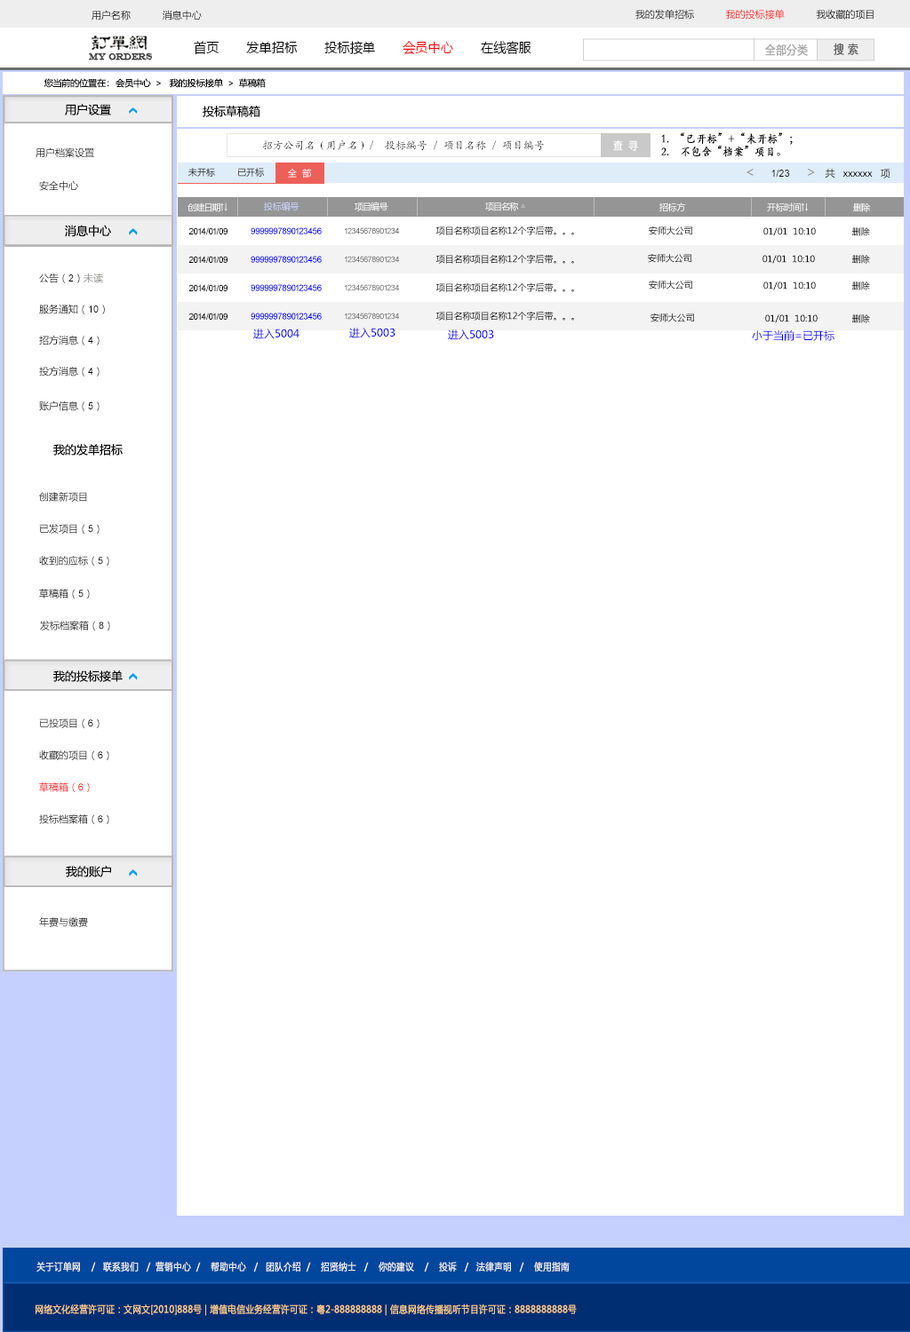
<style>
.page{position:relative;width:910px;height:1332px;background:#ffffff}
.page>*{position:absolute;margin:0}
.t1{font:9.8px "MicrosoftYaHei";color:#000000}
.t2{font:9.8px "MicrosoftYaHei"}
.t3{font:13.7px "MicrosoftYaHei";color:#000000;font-variant:small-caps;scale:0.94 1}
.t4{font:13.7px "MicrosoftYaHei";color:#ff0000;font-variant:small-caps;scale:0.94 1}
.t5{font:8.8px "EngraversMT";color:#434343;font-variant:small-caps;font-weight:bold;scale:0.86 1}
.t6{font:11.7px "MicrosoftYaHei";color:#aaaaaa;font-variant:small-caps;font-weight:bold;scale:0.86 1}
.t7{font:11.7px "MicrosoftYaHei";color:#626262;font-variant:small-caps;font-weight:bold;scale:0.86 1}
.t8{font:8.9px "MicrosoftYaHei";color:#060606}
.t9{font:11.5px "MicrosoftYaHei";color:#060606}
.t10{font:11.7px "STKaiti";color:#000000;font-variant:small-caps;font-weight:bold;scale:0.86 1}
.t11{font:9.8px "MicrosoftYaHei";color:#060606}
.t12{font:10.7px "KaiTi_GB2312";color:#000000}
.t13{font:10.7px "MicrosoftYaHei";color:#ffffff;font-variant:small-caps;font-weight:bold;scale:0.86 1}
.t14{font:8.9px "MicrosoftYaHei"}
.t15{font:9px "MicrosoftYaHei"}
.t16{font:9.8px "ArialMT";color:#060606}
.t17{font:14.2px "MicrosoftYaHei";color:#959595}
.t18{font:8.9px "MicrosoftYaHei";color:#ffffff}
.t19{font:8.9px "MicrosoftYaHei";color:#d1d2ff}
.t20{font:8.9px "ArialMT";color:#020202}
.t21{font:8.9px "ArialMT";color:#0000ff}
.t22{font:8px "ArialMT";color:#535353}
.t23{font:8.9px "MicrosoftYaHei";color:#000000}
.t24{font:8px "ArialMT";color:#626262}
.t25{font:9.8px "MicrosoftYaHei";color:#888584}
.t26{font:10.7px "MicrosoftYaHei";color:#0000ff}
.t27{font:9.8px "ArialMT";color:#000000}
.t28{font:9.8px "ArialMT"}
.t29{font:9.8px "MicrosoftYaHei";color:#ff0000}
.t30{font:9.8px "ArialMT";color:#ff0000}
.t31{font:9.8px "MicrosoftYaHei";color:#eeeeee;font-variant:small-caps;font-weight:bold;scale:0.86 1}
.t32{font:13.7px "STXihei";color:#eeeeee;font-variant:small-caps;font-weight:bold;scale:0.86 1}
.t33{font:9.8px "MicrosoftYaHei";color:#facd89;font-variant:small-caps;font-weight:bold;scale:0.87 1}
.t34{font:9.8px "MicrosoftYaHei";color:#eeeeee;font-variant:small-caps;font-weight:bold;scale:0.87 1}
</style>
<div class="page">
<p class="t1" style="left:91px;top:10px;width:111px;height:10px">用户名称           消息中心</p>
<p class="t2" style="left:635px;top:9px;width:238px;height:11px">我的发单招标           我的投标接单           我收藏的项目</p>
<p class="t3" style="left:194px;top:41px;width:337px;height:14px">首页       发单招标       投标接单       <span class="t4">会员中心</span>       在线客服</p>
<p class="t5" style="left:89px;top:53px;width:64px;height:7px">MY ORDERS</p>
<p class="t6" style="left:765px;top:44px;width:42px;height:12px">全部分类</p>
<p class="t7" style="left:833px;top:43px;width:25px;height:12px">搜 索</p>
<p class="t8" style="left:44px;top:78px;width:222px;height:10px">您当前的位置在：  会员中心  &gt;   我的投标接单  &gt;  草稿箱</p>
<p class="t9" style="left:65px;top:104px;width:46px;height:11px">用户设置</p>
<p class="t9" style="left:203px;top:106px;width:57px;height:11px">投标草稿箱</p>
<p class="t10" style="left:661px;top:132px;width:131px;height:25px">1.  “已开标”+“未开标”；<br>2.    不包含“档案”项目。</p>
<p class="t11" style="left:36px;top:147px;width:58px;height:11px">用户档案设置</p>
<p class="t12" style="left:262px;top:140px;width:282px;height:11px">招方公司名（用户名）/  投标编号 / 项目名称 / 项目编号</p>
<p class="t13" style="left:613px;top:140px;width:25px;height:11px">查  寻</p>
<p class="t14" style="left:188px;top:168px;width:27px;height:9px">未开标</p>
<p class="t15" style="left:238px;top:168px;width:26px;height:9px">已开标</p>
<p class="t15" style="left:288px;top:169px;width:23px;height:9px">全  部</p>
<p class="t16" style="left:746px;top:168px;width:144px;height:11px"><span class="t17">&lt;     </span>1/23     <span class="t17">&gt;  </span><span class="t11">共  </span>xxxxxx  <span class="t11">项</span></p>
<p class="t2" style="left:39px;top:180px;width:39px;height:11px">安全中心</p>
<p class="t18" style="left:187px;top:203px;width:40px;height:9px">创建日期↑↓</p>
<p class="t19" style="left:264px;top:202px;width:35px;height:9px">投标编号</p>
<p class="t18" style="left:354px;top:202px;width:34px;height:9px">项目编号</p>
<p class="t18" style="left:485px;top:202px;width:40px;height:9px">项目名称 △</p>
<p class="t18" style="left:659px;top:203px;width:27px;height:9px">招标方</p>
<p class="t18" style="left:767px;top:203px;width:41px;height:9px">开标时间↑↓</p>
<p class="t18" style="left:853px;top:203px;width:17px;height:9px">删除</p>
<p class="t9" style="left:65px;top:225px;width:46px;height:12px">消息中心</p>
<p class="t20" style="left:188px;top:227px;width:39px;height:7px">2014/01/09</p>
<p class="t21" style="left:250px;top:227px;width:72px;height:7px">9999997890123456</p>
<p class="t22" style="left:345px;top:227px;width:54px;height:7px">12345678901234</p>
<p class="t23" style="left:435px;top:226px;width:139px;height:9px">项目名称项目名称12个字后带。。。</p>
<p class="t14" style="left:648px;top:226px;width:44px;height:9px">安师大公司</p>
<p class="t23" style="left:763px;top:227px;width:52px;height:9px">01/01  10:10</p>
<p class="t14" style="left:852px;top:227px;width:18px;height:9px">删除</p>
<p class="t20" style="left:188px;top:256px;width:39px;height:7px">2014/01/09</p>
<p class="t21" style="left:250px;top:256px;width:72px;height:7px">9999997890123456</p>
<p class="t24" style="left:345px;top:256px;width:54px;height:7px">12345678901234</p>
<p class="t23" style="left:435px;top:254px;width:139px;height:10px">项目名称项目名称12个字后带。。。</p>
<p class="t14" style="left:648px;top:253px;width:43px;height:10px">安师大公司</p>
<p class="t23" style="left:762px;top:255px;width:52px;height:9px">01/01  10:10</p>
<p class="t14" style="left:852px;top:255px;width:18px;height:9px">删除</p>
<p class="t11" style="left:39px;top:273px;width:64px;height:10px">公告（<span class="t16">2</span>）<span class="t25">未读</span></p>
<p class="t14" style="left:648px;top:280px;width:44px;height:10px">安师大公司</p>
<p class="t23" style="left:763px;top:282px;width:52px;height:8px">01/01  10:10</p>
<p class="t14" style="left:852px;top:282px;width:18px;height:8px">删除</p>
<p class="t20" style="left:188px;top:284px;width:39px;height:7px">2014/01/09</p>
<p class="t21" style="left:250px;top:284px;width:72px;height:7px">9999997890123456</p>
<p class="t24" style="left:345px;top:284px;width:54px;height:7px">12345678901234</p>
<p class="t23" style="left:435px;top:282px;width:139px;height:10px">项目名称项目名称12个字后带。。。</p>
<p class="t11" style="left:39px;top:304px;width:66px;height:10px">服务通知（<span class="t16">10</span>）</p>
<p class="t20" style="left:188px;top:313px;width:39px;height:7px">2014/01/09</p>
<p class="t21" style="left:250px;top:313px;width:72px;height:7px">9999997890123456</p>
<p class="t24" style="left:345px;top:313px;width:54px;height:7px">12345678901234</p>
<p class="t23" style="left:435px;top:311px;width:139px;height:10px">项目名称项目名称12个字后带。。。</p>
<p class="t14" style="left:650px;top:313px;width:44px;height:9px">安师大公司</p>
<p class="t23" style="left:765px;top:314px;width:52px;height:9px">01/01  10:10</p>
<p class="t14" style="left:852px;top:314px;width:18px;height:9px">删除</p>
<p class="t26" style="left:253px;top:329px;width:46px;height:10px">进入5004</p>
<p class="t26" style="left:349px;top:328px;width:46px;height:10px">进入5003</p>
<p class="t26" style="left:448px;top:330px;width:46px;height:10px">进入5003</p>
<p class="t11" style="left:39px;top:335px;width:60px;height:11px">招方消息（<span class="t16">4</span>）</p>
<p class="t26" style="left:751px;top:330px;width:83px;height:11px">小于当前=已开标</p>
<p class="t11" style="left:39px;top:366px;width:60px;height:11px">投方消息（<span class="t16">4</span>）</p>
<p class="t11" style="left:39px;top:401px;width:60px;height:10px">账户信息（<span class="t16">5</span>）</p>
<p class="t9" style="left:53px;top:444px;width:70px;height:12px">我的发单招标</p>
<p class="t2" style="left:39px;top:492px;width:48px;height:10px">创建新项目</p>
<p class="t1" style="left:39px;top:524px;width:60px;height:10px">已发项目（<span class="t27">5</span>）</p>
<p class="t11" style="left:39px;top:556px;width:70px;height:10px">收到的应标（<span class="t16">5</span>）</p>
<p class="t11" style="left:39px;top:589px;width:51px;height:10px">草稿箱（<span class="t16">5</span>）</p>
<p class="t2" style="left:40px;top:621px;width:70px;height:10px">发标档案箱（<span class="t28">8</span>）</p>
<p class="t9" style="left:53px;top:671px;width:70px;height:11px">我的投标接单</p>
<p class="t1" style="left:39px;top:719px;width:60px;height:9px">已投项目（<span class="t27">6</span>）</p>
<p class="t11" style="left:39px;top:751px;width:70px;height:9px">收藏的项目（<span class="t16">6</span>）</p>
<p class="t29" style="left:39px;top:783px;width:51px;height:9px">草稿箱（<span class="t30">6</span>）</p>
<p class="t11" style="left:39px;top:814px;width:70px;height:10px">投标档案箱（<span class="t16">6</span>）</p>
<p class="t9" style="left:66px;top:866px;width:45px;height:12px">我的账户</p>
<p class="t11" style="left:39px;top:918px;width:49px;height:9px">年费与缴费</p>
<p class="t31" style="left:36px;top:1261px;width:533px;height:11px"><span class="t32"><br><br></span>关于订单网    /   联系我们   /  营销中心  /    帮助中心   /   团队介绍  /    招贤纳士   /    你的建议    /    投诉   /   法律声明   /    使用指南</p>
<p class="t33" style="left:36px;top:1304px;width:540px;height:12px"><span class="t34"> </span>网络文化经营许可证：文网文[2010]888号 | 增值电信业务经营许可证：粤2-888888888 | 信息网络传播视听节目许可证：8888888888号</p>
</div>
